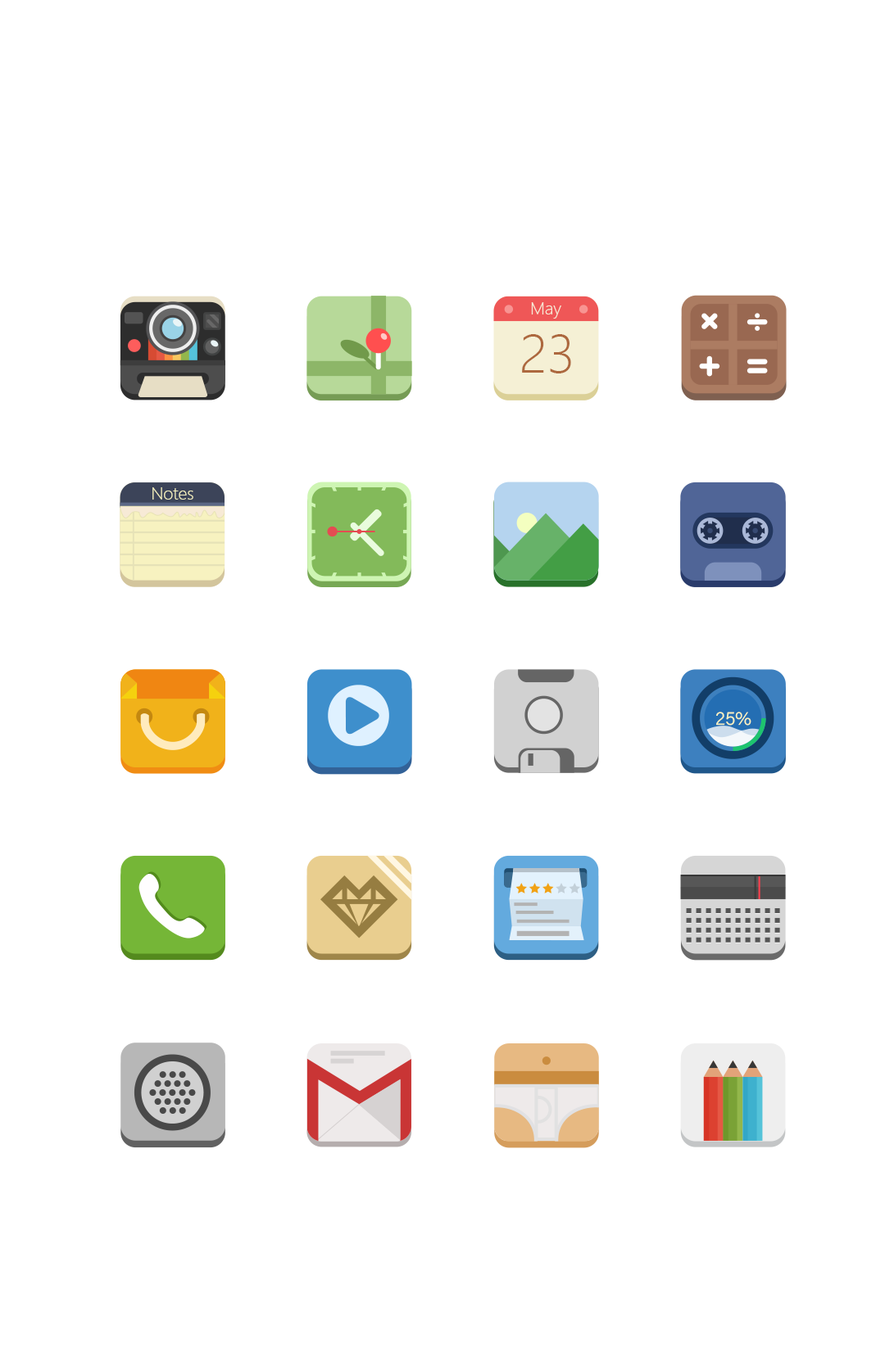
<style>
.page{position:relative;width:885px;height:1348px;background:#ffffff}
.page>*{position:absolute;margin:0}
.t1{font:16.1px "MicrosoftYaHeiUILight";color:#f7ead6}
.t2{font:50.3px "MicrosoftYaHeiUILight";color:#ad683e}
.t3{font:16.1px "MicrosoftYaHeiUILight";color:#f6f2c0}
.t4{font:18.9px "AcuminConcept-Light";color:#f8f2c0}
</style>
<div class="page">
<p class="t1" style="left:531px;top:302px;width:30px;height:17px">May</p>
<p class="t2" style="left:522px;top:334px;width:49px;height:39px">23</p>
<p class="t3" style="left:152px;top:487px;width:41px;height:13px">Notes</p>
<p class="t4" style="left:716px;top:712px;width:35px;height:14px">25%</p>
</div>
